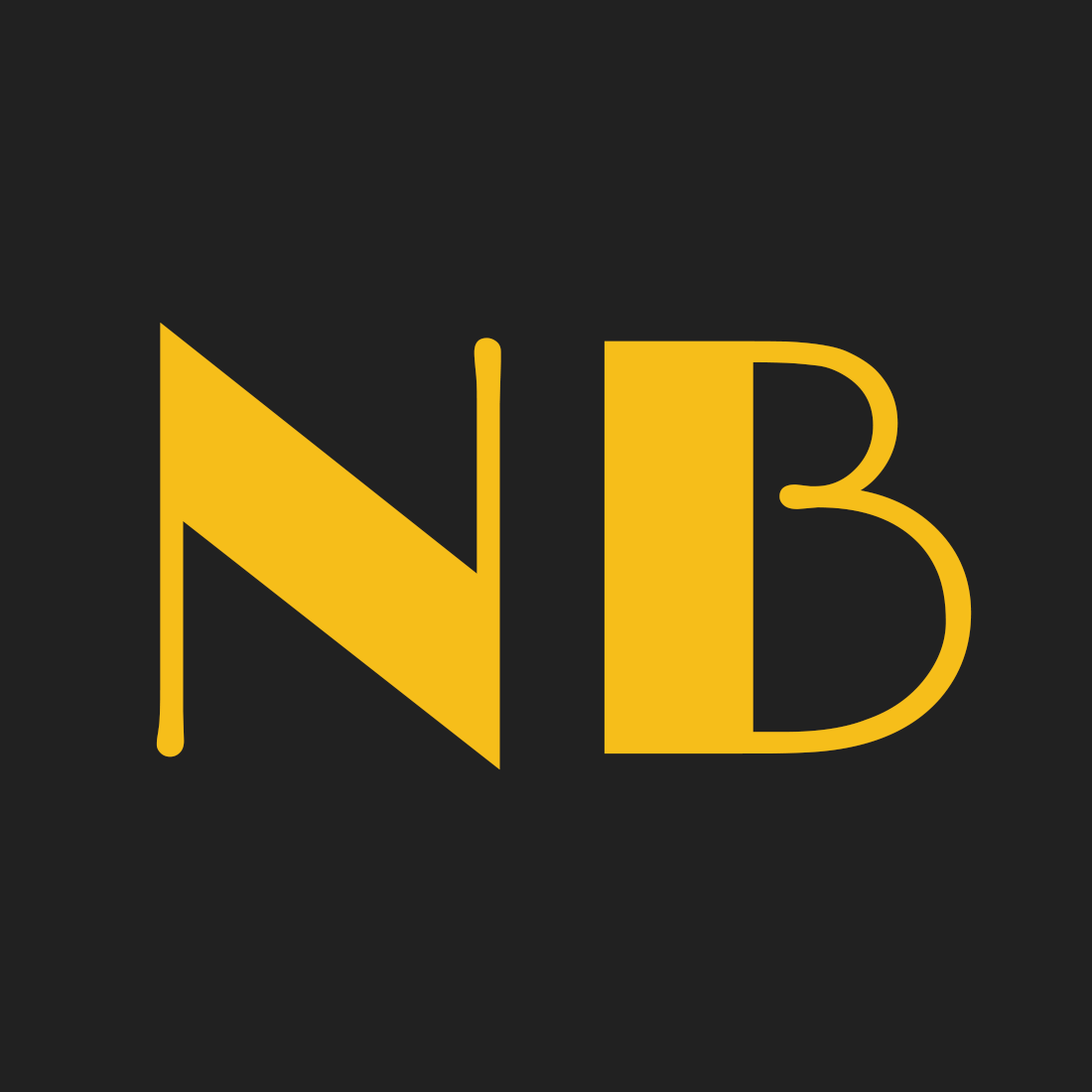
<style>
.page{position:relative;width:1092px;height:1092px;background:#212121}
.page>*{position:absolute;margin:0}
.t1{font:596.6px "Limelight-Regular";color:#f6be1a}
</style>
<div class="page">
<p class="t1" style="left:156px;top:322px;width:816px;height:448px">NB</p>
</div>
